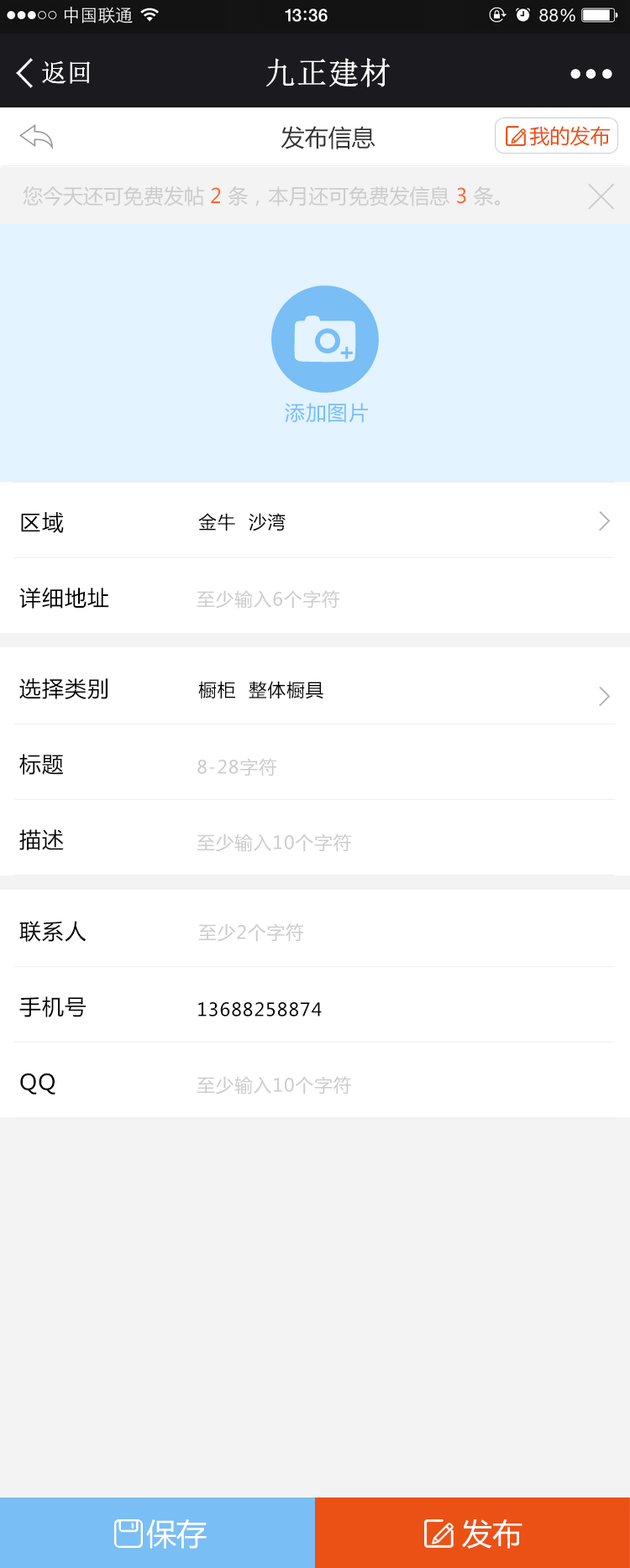
<style>
.page{position:relative;width:630px;height:1568px;background:#ffffff}
.page>*{position:absolute;margin:0}
.t1{font:25.2px "NSimSun";color:#ffffff;font-weight:bold}
.t2{font:30.8px "NSimSun";color:#ffffff;font-weight:bold}
.t3{font:23.5px "MicrosoftYaHei";color:#333333}
.t4{font:23.5px "MicrosoftYaHei";color:#333333;font-weight:bold}
.t5{font:20.1px "MicrosoftYaHei";color:#ea5114}
.t6{font:23.5px "MicrosoftYaHei";color:#999999;font-weight:bold}
.t7{font:20.1px "MicrosoftYaHei";color:#cccccc}
.t8{font:20.1px "MicrosoftYaHei";color:#ff6633}
.t9{font:20.1px "MicrosoftYaHei";letter-spacing:0.05em;color:#79bef5}
.t10{font:21.6px "MicrosoftYaHei";letter-spacing:0.05em;color:#000000}
.t11{font:18px "MicrosoftYaHei";letter-spacing:0.05em;color:#000000}
.t12{font:18px "MicrosoftYaHei";letter-spacing:0.05em;color:#cccccc}
.t13{font:30.2px "MicrosoftYaHei";color:#ffffff}
</style>
<div class="page">
<p class="t1" style="left:42px;top:60px;width:48px;height:24px">返回</p>
<p class="t2" style="left:266px;top:58px;width:123px;height:29px">九正建材</p>
<p class="t3" style="left:280px;top:126px;width:95px;height:23px"><span class="t4"><br></span>发布信息</p>
<p class="t5" style="left:529px;top:126px;width:81px;height:20px"><span class="t6"><br></span>我的发布</p>
<p class="t7" style="left:23px;top:186px;width:476px;height:20px">您今天还可免费发帖 <span class="t8">2 </span>条，本月还可免费发信息 <span class="t8">3 </span>条。</p>
<p class="t9" style="left:285px;top:403px;width:83px;height:20px">添加图片</p>
<p class="t10" style="left:21px;top:512px;width:43px;height:21px">区域</p>
<p class="t11" style="left:198px;top:513px;width:87px;height:18px">金牛  沙湾</p>
<p class="t10" style="left:19px;top:588px;width:90px;height:21px">详细地址</p>
<p class="t12" style="left:196px;top:590px;width:143px;height:19px">至少输入6个字符</p>
<p class="t10" style="left:19px;top:678px;width:88px;height:21px">选择类别</p>
<p class="t11" style="left:198px;top:681px;width:125px;height:18px">橱柜  整体橱具</p>
<p class="t10" style="left:19px;top:754px;width:45px;height:21px">标题</p>
<p class="t12" style="left:197px;top:758px;width:79px;height:18px">8-28字符</p>
<p class="t10" style="left:19px;top:829px;width:45px;height:21px">描述</p>
<p class="t12" style="left:196px;top:834px;width:155px;height:18px">至少输入10个字符</p>
<p class="t10" style="left:19px;top:921px;width:67px;height:21px">联系人</p>
<p class="t12" style="left:198px;top:923px;width:105px;height:19px">至少2个字符</p>
<p class="t10" style="left:19px;top:996px;width:67px;height:21px">手机号</p>
<p class="t11" style="left:198px;top:1002px;width:123px;height:15px">13688258874</p>
<p class="t10" style="left:20px;top:1073px;width:35px;height:22px">QQ</p>
<p class="t12" style="left:196px;top:1076px;width:155px;height:19px">至少输入10个字符</p>
<p class="t13" style="left:146px;top:1519px;width:60px;height:30px">保存</p>
<p class="t13" style="left:462px;top:1518px;width:60px;height:31px">发布</p>
</div>
